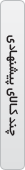
<style>
.page{position:relative;width:25px;height:170px}
.page>*{position:absolute;margin:0}
.t1{font:13.2px "BYekan";color:#231f20}
</style>
<div class="page">
<p class="t1" style="left:5px;top:35px;width:13px;height:101px;rotate:90deg">چند کـالای پیشنهـادی</p>
</div>
